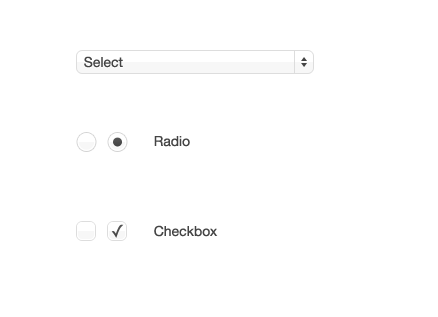
<style>
.page{position:relative;width:438px;height:317px;background:#ffffff}
.page>*{position:absolute;margin:0}
.t1{font:14px "HelveticaNeue";color:#444444}
</style>
<div class="page">
<p class="t1" style="left:84px;top:56px;width:39px;height:12px">Select</p>
<p class="t1" style="left:154px;top:136px;width:36px;height:11px">Radio</p>
<p class="t1" style="left:154px;top:225px;width:64px;height:12px">Checkbox</p>
</div>
